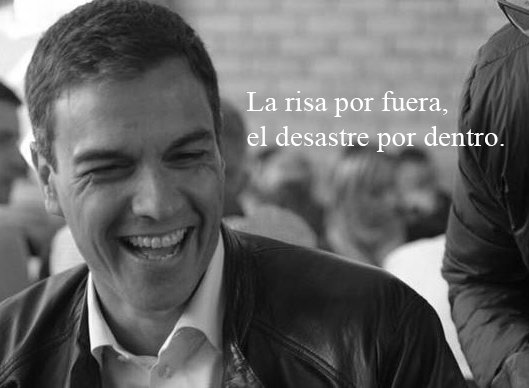
<style>
.page{position:relative;width:529px;height:388px}
.page>*{position:absolute;margin:0}
.t1{font:29.3px "TimesNewRomanPSMT";color:#ffffff}
</style>
<div class="page">
<p class="t1" style="left:247px;top:91px;width:257px;height:61px">La risa por fuera,<br>el desastre por dentro.</p>
</div>
